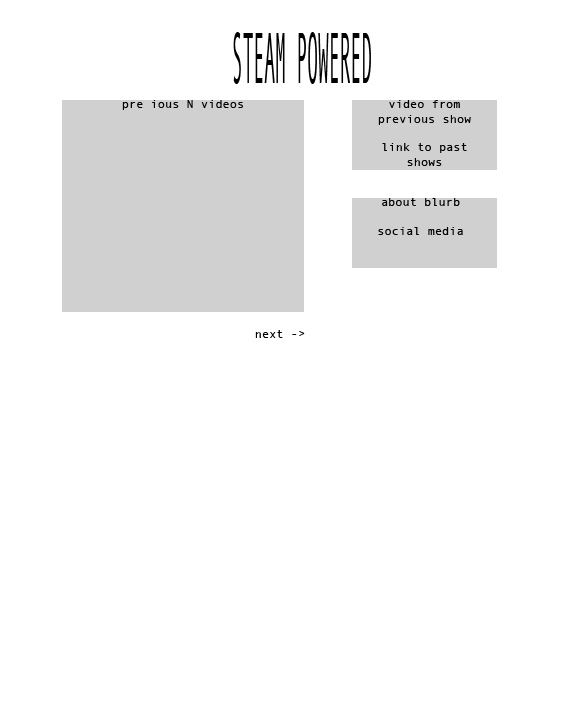
<style>
.page{position:relative;width:576px;height:720px;background:#ffffff}
.page>*{position:absolute;margin:0}
.t1{font:72.4px "AndaleMono";color:#000000;scale:0.25 1}
.t2{font:12px "AndaleMono";color:#000000}
</style>
<div class="page">
<p class="t1" style="left:233px;top:32px;width:138px;height:52px">STEAM POWERED</p>
<p class="t2" style="left:122px;top:100px;width:121px;height:10px">pre ious N videos</p>
<p class="t2" style="left:378px;top:100px;width:93px;height:66px;text-align:center">video from previous show<br><br>link to past shows</p>
<p class="t2" style="left:378px;top:198px;width:85px;height:37px;text-align:center">about blurb<br><br>social media</p>
<p class="t2" style="left:255px;top:330px;width:50px;height:8px">next -&gt;</p>
</div>
